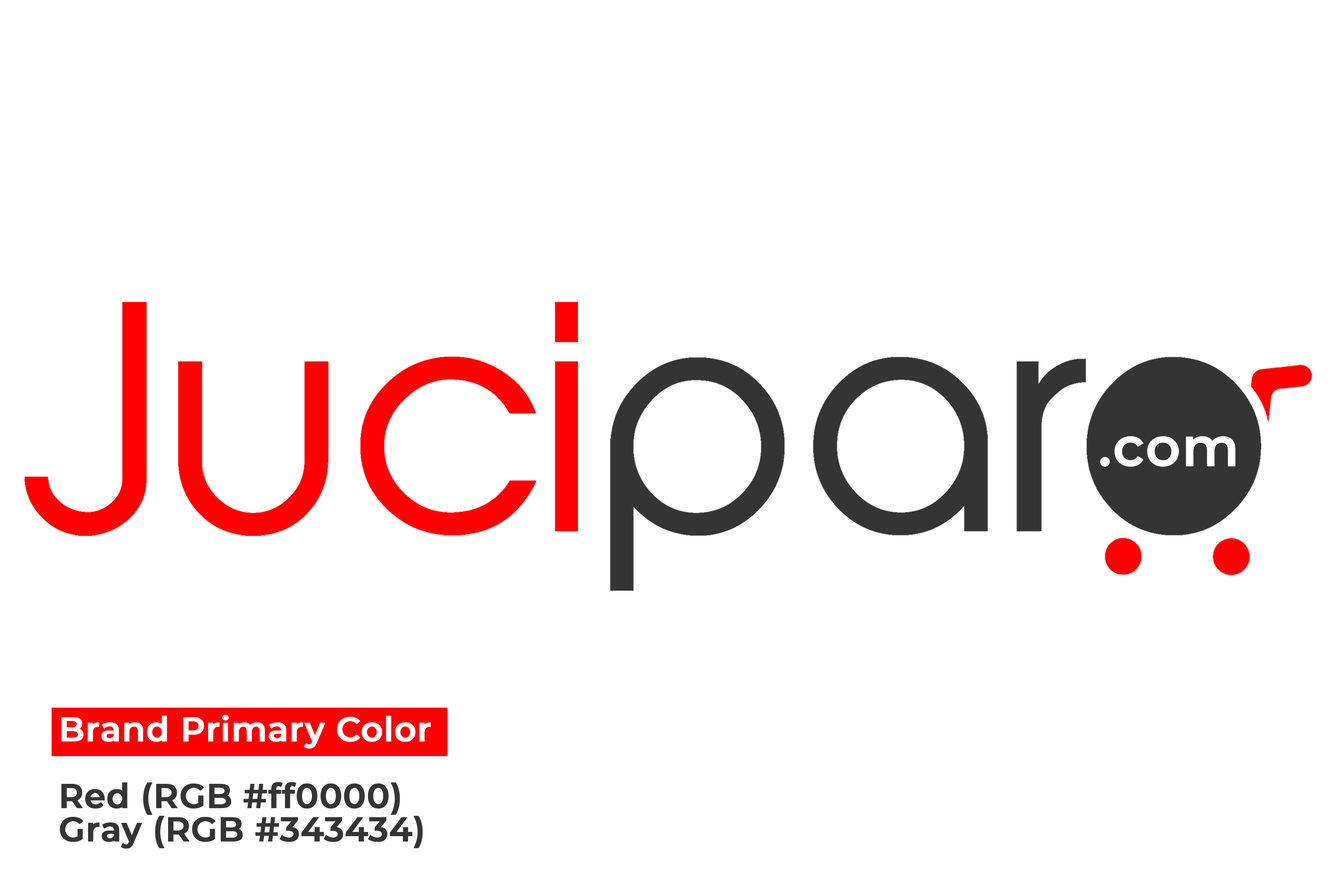
<style>
.page{position:relative;width:1337px;height:892px;background:#ffffff}
.page>*{position:absolute;margin:0}
.t1{font:33.9px/33.4px "Montserrat-SemiBold";color:#343434;font-weight:bold}
.t2{font:33.9px/33.4px "Montserrat-SemiBold";color:#ffffff;font-weight:bold}
</style>
<div class="page">
<p class="t1" style="left:60px;top:714px;width:371px;height:134px"><span class="t2">Brand Primary Color<br></span><br>Red (RGB #ff0000)<br>Gray (RGB #343434)</p>
</div>
